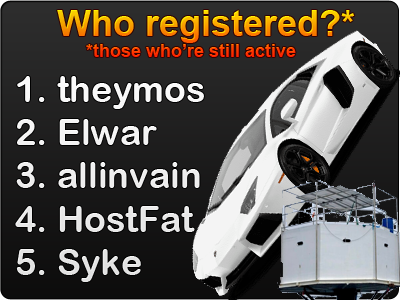
<style>
.page{position:relative;width:400px;height:300px}
.page>*{position:absolute;margin:0}
.t1{font:18px "Arial-BoldMT"}
.t2{font:36px "Arial-BoldMT"}
.t3{font:36px "ArialRoundedMTBold";color:#f0f0f0}
</style>
<div class="page">
<p class="t1" style="left:57px;top:10px;width:298px;height:47px"><span class="t2">     Who registered?*<br></span>    *those who’re still active</p>
<p class="t3" style="left:15px;top:76px;width:189px;height:206px">1. theymos<br>2. Elwar<br>3. allinvain<br>4. HostFat<br>5. Syke</p>
</div>
